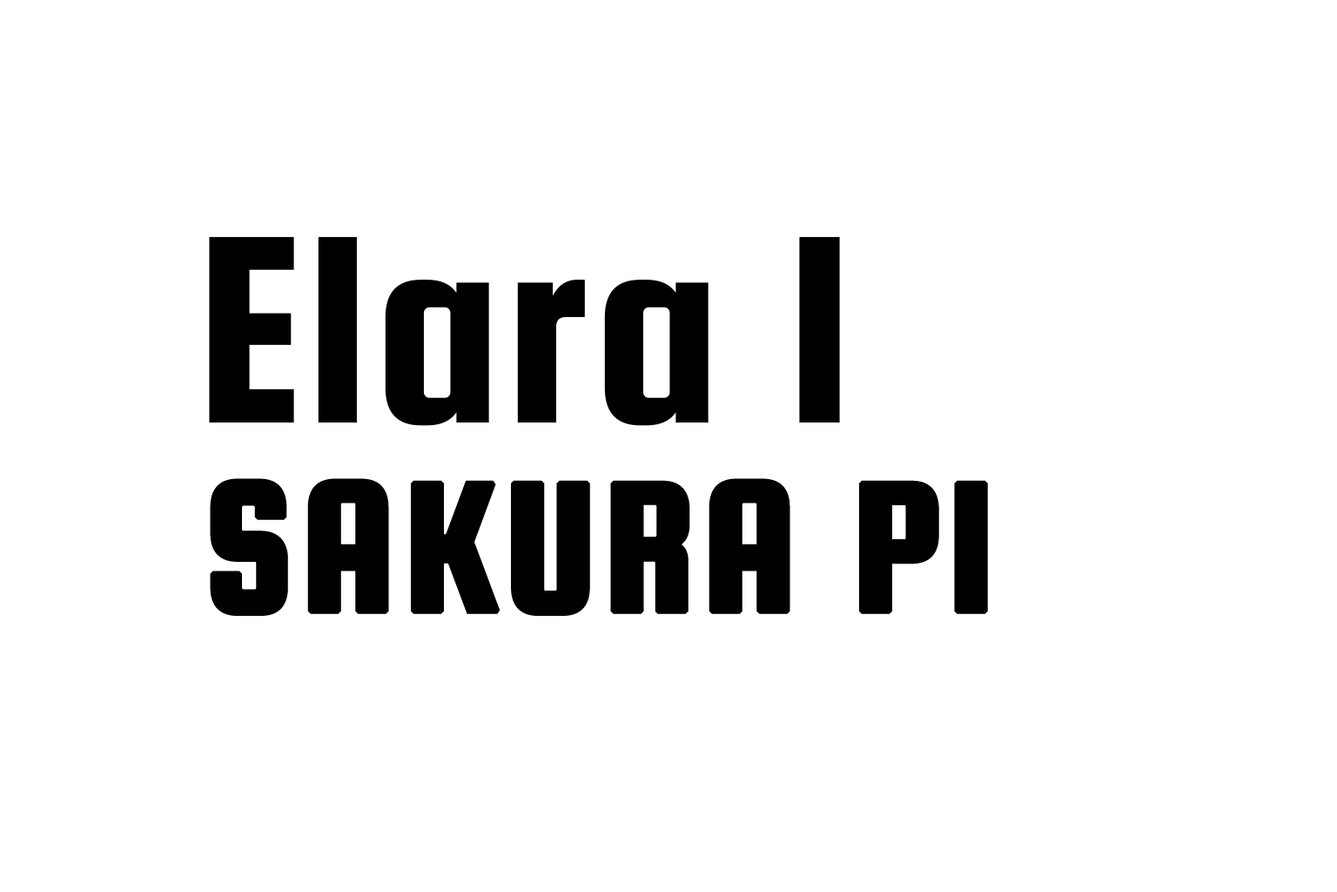
<style>
.page{position:relative;width:1337px;height:892px;background:#ffffff}
.page>*{position:absolute;margin:0}
.t1{font:286.8px "SquadaOne-Regular";letter-spacing:0.01em;color:#000000}
.t2{font:197.3px "SquadaOne-Regular";letter-spacing:0.01em;color:#000000;font-weight:bold}
</style>
<div class="page">
<p class="t1" style="left:209px;top:237px;width:631px;height:189px">Elara I</p>
<p class="t2" style="left:210px;top:478px;width:778px;height:138px">SAKURA PI</p>
</div>
